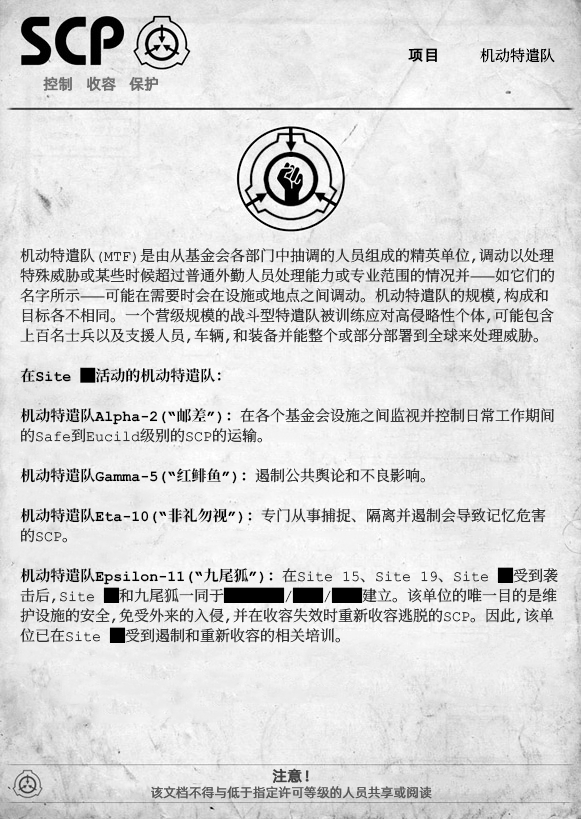
<style>
.page{position:relative;width:581px;height:819px}
.page>*{position:absolute;margin:0}
.t1{font:15px "ContainmentBreach-Regular";color:#000000}
.t2{font:15px "AlibabaPuHuiTiR";color:#000000;font-weight:bold}
.t3{font:15px "AlibabaPuHuiTiR";color:#707070;font-weight:bold}
.t4{font:15px/20px "ContainmentBreach-Regular";color:#353535}
.t5{font:15px/20px "ContainmentBreach-Bold";color:#000000}
.t6{font:15px/20px "ContainmentBreach-Regular";color:#000000;font-weight:bold}
.t7{font:15px/20px "ContainmentBreach-Regular";color:#000000}
.t8{font:15px "AlibabaPuHuiTiR";color:#414141;font-weight:bold}
.t9{font:13px "AlibabaPuHuiTiR";color:#575757}
</style>
<div class="page">
<p class="t1" style="left:408px;top:48px;width:147px;height:15px"><span class="t2">项目  </span>机动特遣队</p>
<p class="t3" style="left:43px;top:76px;width:115px;height:15px">控制   收容   保护</p>
<p class="t4" style="left:20px;top:248px;width:538px;height:395px">机动特遣队（MTF）是由从基金会各部门中抽调的人员组成的精英单位，调动以处理<br>特殊威胁或某些时候超过普通外勤人员处理能力或专业范围的情况并——如它们的<br>名字所示——可能在需要时会在设施或地点之间调动。机动特遣队的规模，构成和<br>目标各不相同。一个营级规模的战斗型特遣队被训练应对高侵略性个体，可能包含<br>上百名士兵以及支援人员，车辆，和装备并能整个或部分部署到全球来处理威胁。<br><br><span class="t5">在Site █活动的机动特遣队：<br><br>机动特遣队Alpha-2(</span><span class="t6">“</span><span class="t5">邮差</span><span class="t6">”</span><span class="t5">)：</span>在各个基金会设施之间监视并控制日常工作期间<br>的Safe到Eucild级别的SCP的运输。<br><br><span class="t5">机动特遣队Gamma-5(</span><span class="t6">“</span><span class="t5">红鲱鱼</span><span class="t6">”</span><span class="t5">)：</span>遏制公共舆论和不良影响。<br><br><span class="t5">机动特遣队Eta-10(</span><span class="t6">“</span><span class="t5">非礼勿视</span><span class="t6">”</span><span class="t5">)：</span>专门从事捕捉、隔离并遏制会导致记忆危害<br>的SCP。<br><br><span class="t5">机动特遣队Epsilon-11(</span><span class="t6">“</span><span class="t5">九尾狐</span><span class="t6">”</span><span class="t5">)：</span>在Site 15、Site 19、Site <span class="t7">█</span>受到袭<br>击后，Site <span class="t7">█</span>和九尾狐一同于<span class="t7">████</span>/<span class="t7">██</span>/<span class="t7">██</span>建立。该单位的唯一目的是维<br>护设施的安全，免受外来的入侵，并在收容失效时重新收容逃脱的SCP。因此，该单<br>位已在Site <span class="t7">█</span>受到遏制和重新收容的相关培训。</p>
<p class="t8" style="left:272px;top:768px;width:37px;height:15px">注意！</p>
<p class="t9" style="left:151px;top:786px;width:281px;height:13px">该文档不得与低于指定许可等级的人员共享或阅读</p>
</div>
